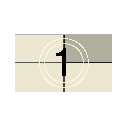
<style>
.page{position:relative;width:128px;height:128px;background:#ffffff}
.page>*{position:absolute;margin:0}
.t1{font:40px "Helvetica";letter-spacing:0.025em;color:#000000}
</style>
<div class="page">
<p class="t1" style="left:56px;top:48px;width:10px;height:28px">1</p>
</div>
